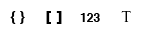
<style>
.page{position:relative;width:142px;height:36px;background:#ffffff}
.page>*{position:absolute;margin:0}
.t1{font:14px "Helvetica-Bold";color:#000000}
.t2{font:18px "Helvetica-Bold";color:#000000}
.t3{font:12px "Helvetica-Bold";color:#000000}
.t4{font:14px "TrajanPro-Regular";color:#000000}
</style>
<div class="page">
<p class="t1" style="left:10px;top:11px;width:15px;height:13px">{ }</p>
<p class="t2" style="left:46px;top:11px;width:16px;height:13px">[ ]</p>
<p class="t3" style="left:80px;top:13px;width:20px;height:9px">123</p>
<p class="t4" style="left:121px;top:11px;width:10px;height:11px">T</p>
</div>
